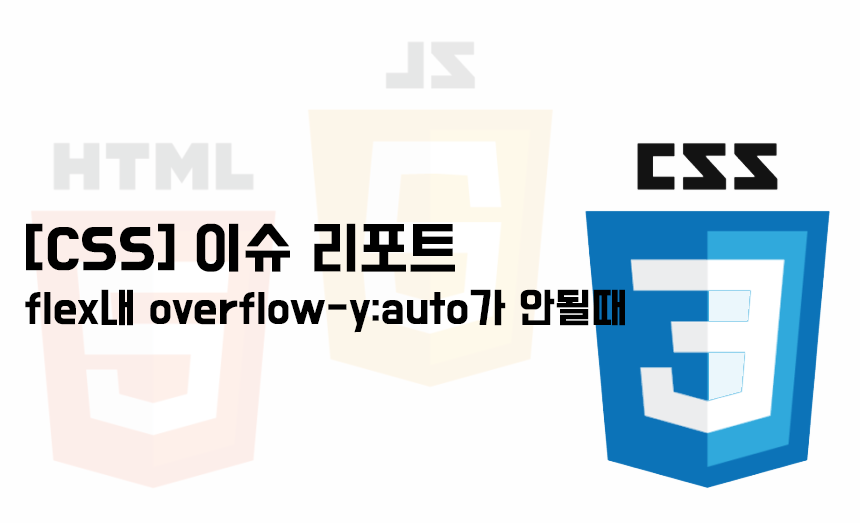
<style>
.page{position:relative;width:860px;height:523px;background:#fefefe}
.page>*{position:absolute;margin:0}
.t1{font:37px "BMDoHyeon-OTF";color:#000000;font-weight:bold}
.t2{font:50px "BMDoHyeon-OTF";color:#000000;font-weight:bold}
</style>
<div class="page">
<p class="t1" style="left:25px;top:223px;width:600px;height:110px"><span class="t2">[CSS] 이슈 리포트<br><br></span>flex내 overflow-y:auto가 안될때</p>
</div>
